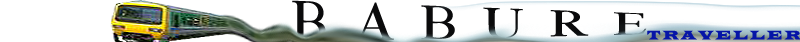
<style>
.page{position:relative;width:800px;height:42px;background:#ffffff}
.page>*{position:absolute;margin:0}
.t1{font:45.4px "TimesNewRomanPSMT";letter-spacing:0.48em;color:#0a0a0b;text-transform:uppercase;scale:1.21 1}
.t2{font:13px "LatinWide";letter-spacing:0.2em;color:#0615a7;text-transform:uppercase;scale:0.85 1}
</style>
<div class="page">
<p class="t1" style="left:292px;top:0px;width:355px;height:43px">Babure</p>
<p class="t2" style="left:647px;top:30px;width:154px;height:10px">traveller</p>
</div>
